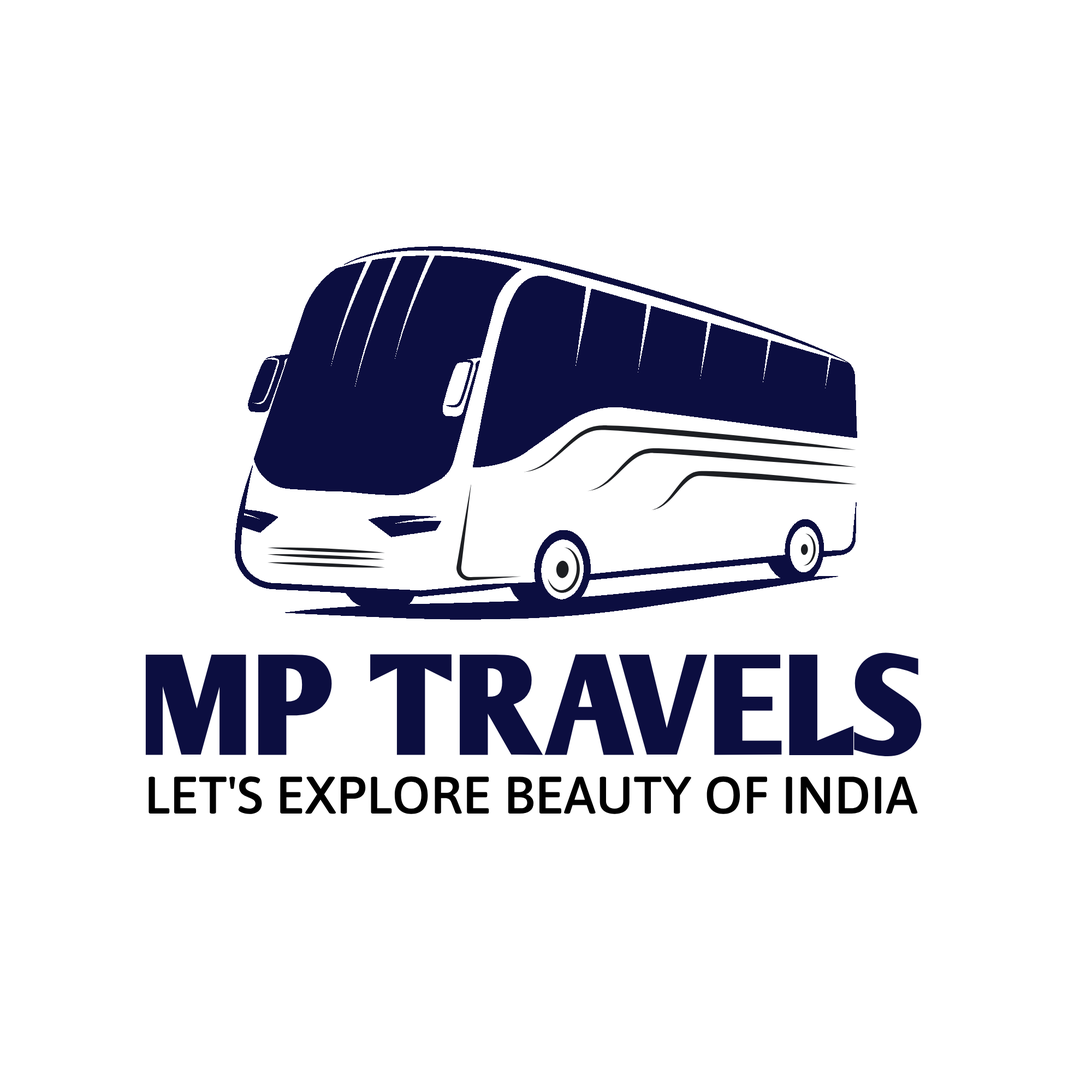
<style>
.page{position:relative;width:1092px;height:1092px;background:#ffffff}
.page>*{position:absolute;margin:0}
.t1{font:140.3px "ArmWrestler-Bold";color:#0c0e40}
.t2{font:52.6px "Asap-Symbol";color:#000000}
</style>
<div class="page">
<p class="t1" style="left:145px;top:652px;width:777px;height:105px">MP TRAVELS</p>
<p class="t2" style="left:149px;top:776px;width:769px;height:38px">LET'S EXPLORE BEAUTY OF INDIA</p>
</div>
